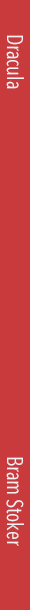
<style>
.page{position:relative;width:30px;height:610px;background:#c93a3c}
.page>*{position:absolute;margin:0}
.t1{font:22.4px "AvenirNextCondensed-Regular";color:#eff3f6;scale:0.94 1}
</style>
<div class="page">
<p class="t1" style="left:6px;top:35px;width:18px;height:54px;rotate:90deg">Dracula</p>
<p class="t1" style="left:6px;top:457px;width:18px;height:89px;rotate:90deg">Bram Stoker</p>
</div>
